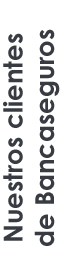
<style>
.page{position:relative;width:64px;height:280px;background:#ffffff}
.page>*{position:absolute;margin:0}
.t1{font:26.2px "CenturyGothic-Bold";color:#383c42}
</style>
<div class="page">
<p class="t1" style="left:3px;top:29px;width:57px;height:217px;text-align:center;rotate:-90deg">Nuestros clientes<br>de Bancaseguros</p>
</div>
